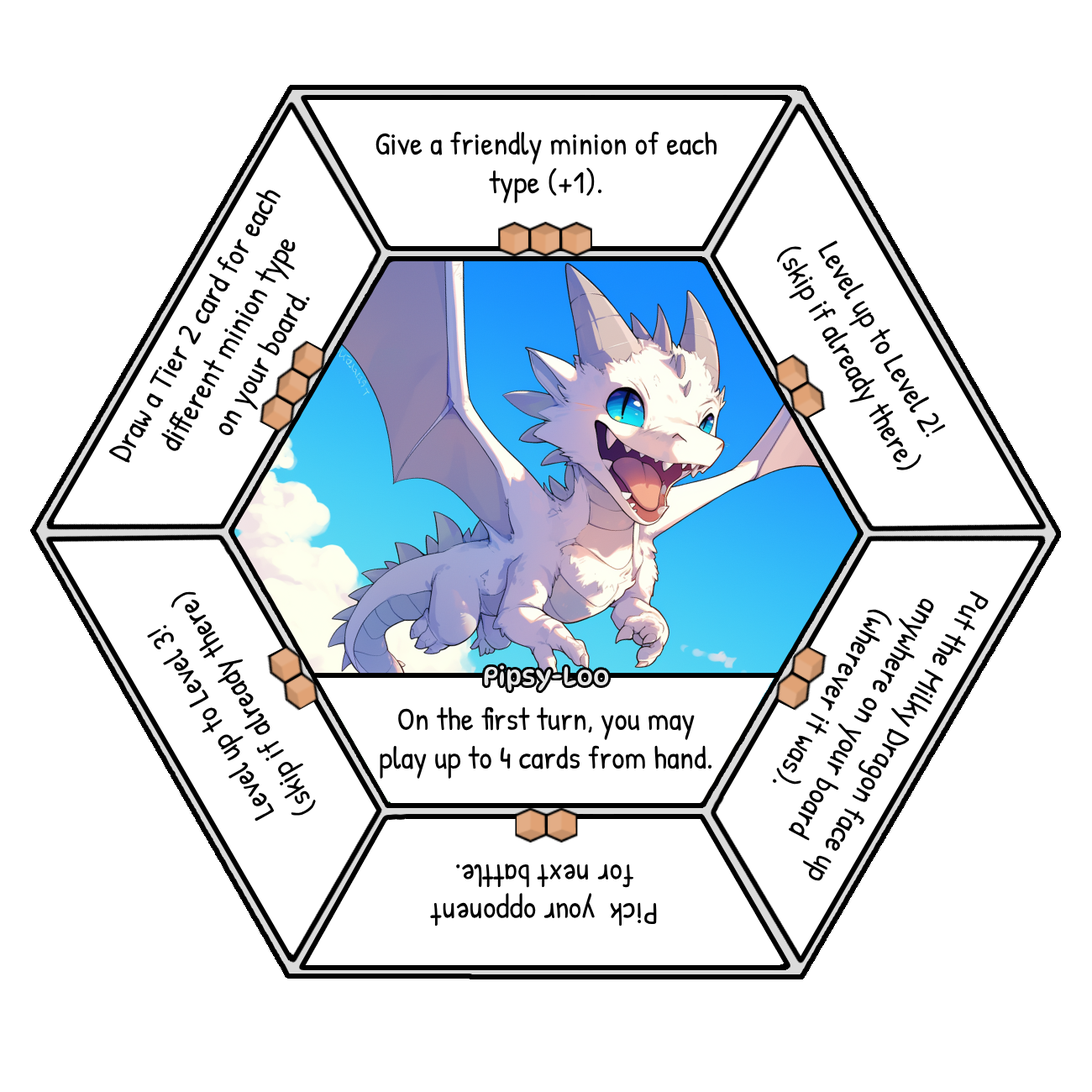
<style>
.page{position:relative;width:1092px;height:1092px;background:#ffffff}
.page>*{position:absolute;margin:0}
.t1{font:31.9px "PatrickHand-Regular";color:#000000}
.t2{font:26px "DynaPuff-Regular";color:#e7e7e7}
</style>
<div class="page">
<p class="t1" style="left:375px;top:131px;width:342px;height:72px;text-align:center">Give a friendly minion of each<br>type (+1).</p>
<p class="t1" style="left:108px;top:189px;width:202px;height:274px;text-align:center;rotate:-60deg">Draw a Tier 2 card for each<br>different minion type<br>on your board.</p>
<p class="t1" style="left:776px;top:240px;width:170px;height:230px;text-align:center;rotate:60deg">Level up to Level 2!<br>(skip if already there)</p>
<p class="t1" style="left:147px;top:591px;width:169px;height:231px;text-align:center;rotate:-120deg">Level up to Level 3!<br>(skip if already there)</p>
<p class="t1" style="left:772px;top:591px;width:217px;height:290px;text-align:center;rotate:120deg">Put the Milky Dragon face up<br>anywhere on your board<br>(wherever it was).</p>
<p class="t2" style="left:484px;top:665px;width:125px;height:26px">Pipsy-Loo</p>
<p class="t1" style="left:380px;top:706px;width:332px;height:73px;text-align:center">On the first turn, you may<br>play up to 4 cards from hand.</p>
<p class="t1" style="left:430px;top:864px;width:227px;height:63px;text-align:center;rotate:-180deg">Pick  your opponent<br>for next battle.</p>
</div>
